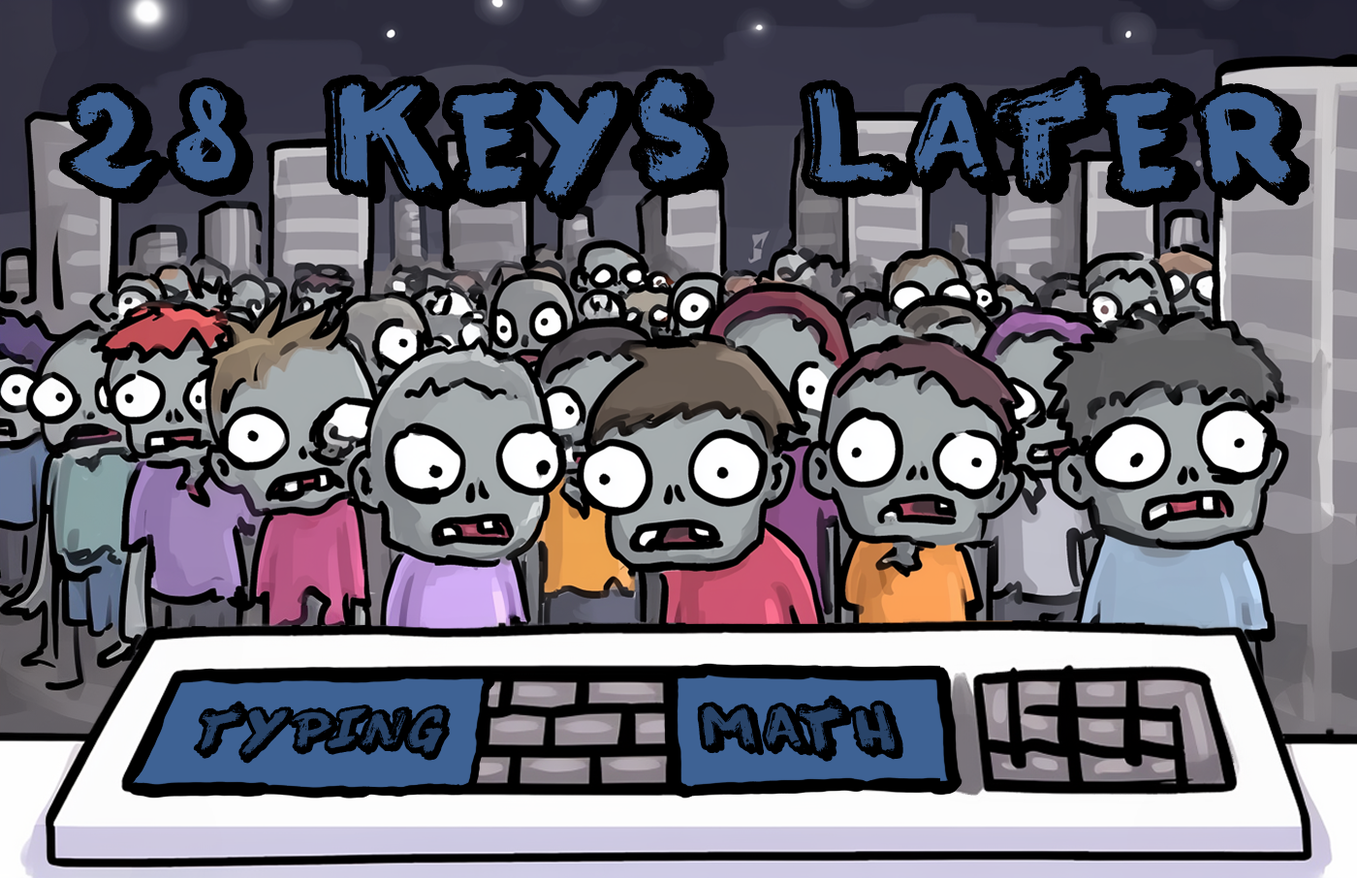
<style>
.page{position:relative;width:1357px;height:878px}
.page>*{position:absolute;margin:0}
.t1{font:155.1px "ThisNight";letter-spacing:0.08em;color:#000000}
.t2{font:67.8px "ThisNight";letter-spacing:0.08em;color:#000000;scale:0.93 1}
.t3{font:73.3px "ThisNight";letter-spacing:0.08em;color:#000000}
</style>
<div class="page">
<p class="t1" style="left:59px;top:66px;width:1251px;height:154px">28 keys later</p>
<p class="t2" style="left:193px;top:701px;width:258px;height:63px">TYPING</p>
<p class="t3" style="left:697px;top:695px;width:207px;height:67px">MATH</p>
</div>
